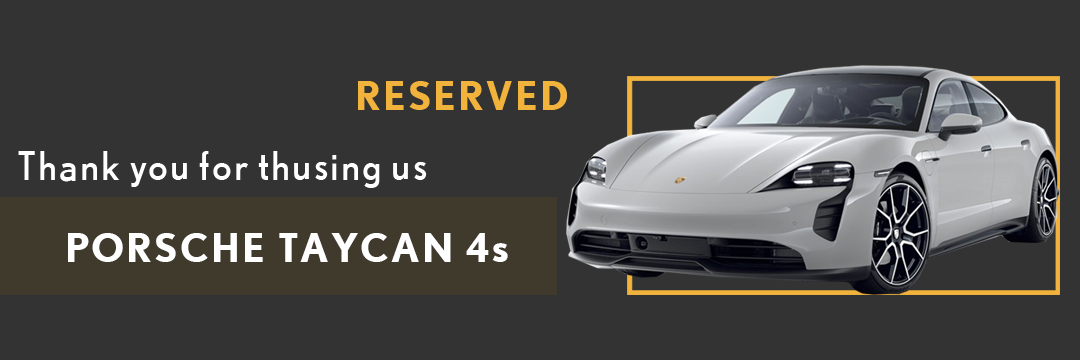
<style>
.page{position:relative;width:1080px;height:360px;background:#333333}
.page>*{position:absolute;margin:0}
.t1{font:40px "Nobel-Bold";letter-spacing:0.05em;color:#f2b33d}
.t2{font:40px "Nobel-Regular";letter-spacing:0.05em;color:#ffffff}
.t3{font:40px "Nobel-Bold";letter-spacing:0.05em;color:#ffffff}
</style>
<div class="page">
<p class="t1" style="left:358px;top:81px;width:209px;height:29px">RESERVED</p>
<p class="t2" style="left:18px;top:151px;width:409px;height:37px">Thank you for thusing us</p>
<p class="t3" style="left:68px;top:233px;width:440px;height:29px">PORSCHE TAYCAN 4s</p>
</div>
